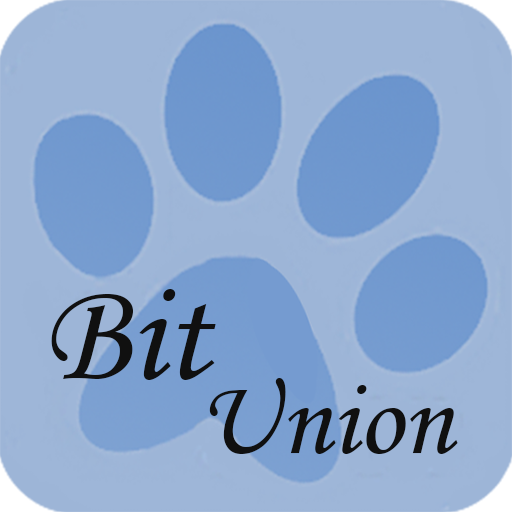
<style>
.page{position:relative;width:512px;height:512px;background:#9eb6d8}
.page>*{position:absolute;margin:0}
.t1{font:142.6px "MonotypeCorsiva";color:#101010}
.t2{font:110px "MonotypeCorsiva";color:#101010}
</style>
<div class="page">
<p class="t1" style="left:51px;top:289px;width:165px;height:91px">Bit</p>
<p class="t2" style="left:209px;top:378px;width:249px;height:76px">Union</p>
</div>
